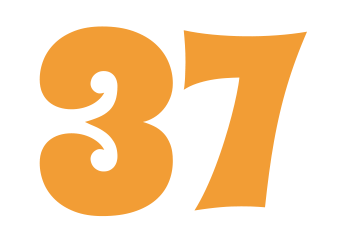
<style>
.page{position:relative;width:354px;height:236px;background:#ffffff}
.page>*{position:absolute;margin:0}
.t1{font:250px "SpicyRice-Regular";color:#f29d35}
</style>
<div class="page">
<p class="t1" style="left:39px;top:26px;width:268px;height:191px">37</p>
</div>
